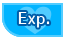
<style>
.page{position:relative;width:64px;height:40px;background:#00b4ff}
.page>*{position:absolute;margin:0}
.t1{font:16px "JK-Gothic-M";color:#ffffff}
</style>
<div class="page">
<p class="t1" style="left:18px;top:12px;width:32px;height:16px">Exp.</p>
</div>
